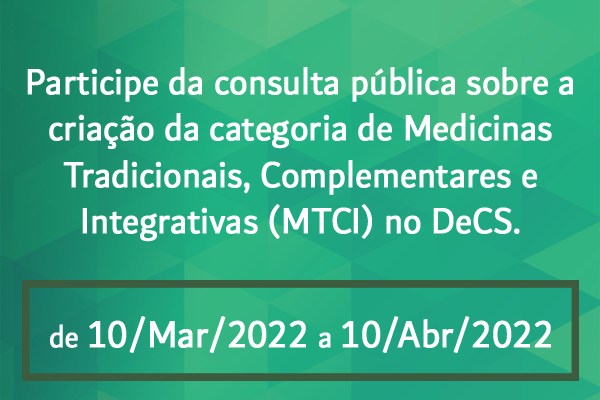
<style>
.page{position:relative;width:600px;height:400px}
.page>*{position:absolute;margin:0}
.t1{font:38.8px "Dubai-Regular";color:#ffffff;font-weight:bold;scale:0.9 1}
.t2{font:40px "Dubai-Regular";color:#ffffff;font-weight:bold;scale:0.9 1}
.t3{font:32.6px "Dubai-Regular";color:#ffffff;font-weight:bold;scale:0.9 1}
</style>
<div class="page">
<p class="t1" style="left:27px;top:67px;width:546px;height:175px;text-align:center">Participe da consulta pública sobre a criação da categoria de Medicinas Tradicionais, Complementares e Integrativas (MTCI) no DeCS.</p>
<p class="t2" style="left:50px;top:316px;width:501px;height:37px"><span class="t3">de </span>10/Mar/2022 <span class="t3">a </span>10/Abr/2022</p>
</div>
